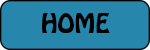
<style>
.page{position:relative;width:150px;height:50px;background:#2686ac}
.page>*{position:absolute;margin:0}
.t1{font:24px "HoboStd";color:#000000}
</style>
<div class="page">
<p class="t1" style="left:42px;top:13px;width:68px;height:20px">HOME</p>
</div>
